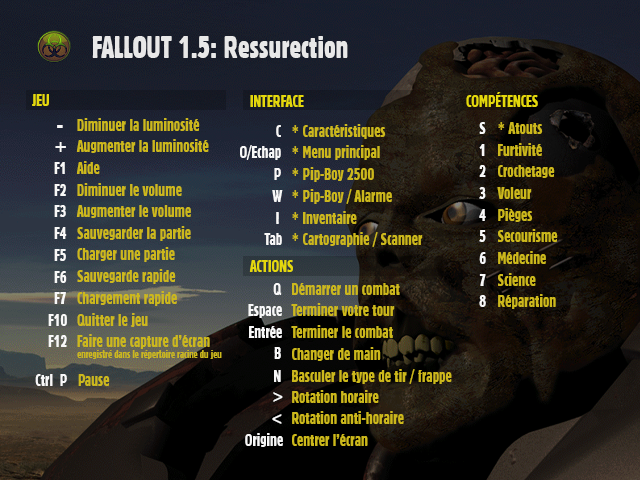
<style>
.page{position:relative;width:640px;height:480px}
.page>*{position:absolute;margin:0}
.t1{font:30px "Gothic821CondensedBT-Regular";color:#e8e8e8;scale:0.95 1}
.t2{font:17px "Gothic821CondensedBT-Regular";color:#e4d80c;scale:0.9 1}
.t3{font:19px "Gothic821CondensedBT-Regular";color:#f8f8f8;scale:1.3 1}
.t4{font:17px "Gothic821CondensedBT-Regular";color:#ccb81c;scale:0.9 1}
.t5{font:17px "Gothic821CondensedBT-Regular";color:#f8f8f8;scale:0.9 1}
.t6{font:17px "Gothic821CondensedBT-Regular";color:#f8f8f8;scale:1.05 1}
.t7{font:11px "Gothic821CondensedBT-Regular";color:#ccb81c;scale:0.9 1}
</style>
<div class="page">
<p class="t1" style="left:92px;top:36px;width:256px;height:22px">FALLOUT 1.5: Ressurection</p>
<p class="t2" style="left:32px;top:94px;width:17px;height:12px">JEU</p>
<p class="t2" style="left:250px;top:95px;width:54px;height:12px">INTERFACE</p>
<p class="t2" style="left:466px;top:92px;width:72px;height:15px">COMPÉTENCES</p>
<p class="t3" style="left:57px;top:125px;width:6px;height:3px">-</p>
<p class="t4" style="left:77px;top:118px;width:123px;height:13px">Diminuer la luminosité</p>
<p class="t5" style="left:276px;top:125px;width:5px;height:12px">C</p>
<p class="t4" style="left:292px;top:124px;width:94px;height:15px">* Caractéristiques</p>
<p class="t5" style="left:479px;top:122px;width:7px;height:12px">S</p>
<p class="t4" style="left:498px;top:122px;width:45px;height:12px">* Atouts</p>
<p class="t6" style="left:55px;top:142px;width:11px;height:10px">+</p>
<p class="t4" style="left:76px;top:139px;width:133px;height:14px">Augmenter la luminosité</p>
<p class="t5" style="left:240px;top:145px;width:41px;height:15px">O/Echap</p>
<p class="t4" style="left:292px;top:145px;width:88px;height:15px">* Menu principal</p>
<p class="t5" style="left:479px;top:144px;width:6px;height:12px">1</p>
<p class="t4" style="left:498px;top:143px;width:44px;height:13px">Furtivité</p>
<p class="t4" style="left:76px;top:161px;width:24px;height:13px">Aide</p>
<p class="t5" style="left:54px;top:162px;width:11px;height:12px">F1</p>
<p class="t5" style="left:274px;top:168px;width:7px;height:12px">P</p>
<p class="t4" style="left:292px;top:167px;width:82px;height:15px">* Pip-Boy 2500</p>
<p class="t5" style="left:479px;top:165px;width:7px;height:12px">2</p>
<p class="t4" style="left:498px;top:165px;width:57px;height:13px">Crochetage</p>
<p class="t5" style="left:54px;top:184px;width:12px;height:12px">F2</p>
<p class="t4" style="left:77px;top:183px;width:105px;height:13px">Diminuer le volume</p>
<p class="t5" style="left:272px;top:190px;width:11px;height:12px">W</p>
<p class="t4" style="left:292px;top:189px;width:100px;height:15px">* Pip-Boy / Alarme</p>
<p class="t5" style="left:479px;top:187px;width:7px;height:12px">3</p>
<p class="t4" style="left:497px;top:187px;width:35px;height:12px">Voleur</p>
<p class="t5" style="left:54px;top:205px;width:12px;height:12px">F3</p>
<p class="t4" style="left:76px;top:205px;width:115px;height:13px">Augmenter le volume</p>
<p class="t5" style="left:479px;top:209px;width:7px;height:12px">4</p>
<p class="t4" style="left:498px;top:208px;width:35px;height:14px">Pièges</p>
<p class="t5" style="left:276px;top:212px;width:3px;height:12px">I</p>
<p class="t4" style="left:292px;top:211px;width:65px;height:13px">* Inventaire</p>
<p class="t5" style="left:54px;top:227px;width:13px;height:12px">F4</p>
<p class="t4" style="left:77px;top:226px;width:114px;height:15px">Sauvegarder la partie</p>
<p class="t5" style="left:264px;top:233px;width:18px;height:12px">Tab</p>
<p class="t4" style="left:292px;top:232px;width:131px;height:15px">* Cartographie / Scanner</p>
<p class="t5" style="left:479px;top:230px;width:7px;height:12px">5</p>
<p class="t4" style="left:498px;top:229px;width:60px;height:13px">Secourisme</p>
<p class="t5" style="left:54px;top:249px;width:12px;height:12px">F5</p>
<p class="t4" style="left:77px;top:247px;width:98px;height:15px">Charger une partie</p>
<p class="t5" style="left:479px;top:252px;width:7px;height:12px">6</p>
<p class="t4" style="left:498px;top:251px;width:48px;height:13px">Médecine</p>
<p class="t4" style="left:77px;top:269px;width:99px;height:15px">Sauvegarde rapide</p>
<p class="t2" style="left:249px;top:260px;width:44px;height:12px">ACTIONS</p>
<p class="t5" style="left:54px;top:271px;width:13px;height:12px">F6</p>
<p class="t5" style="left:479px;top:274px;width:7px;height:12px">7</p>
<p class="t4" style="left:498px;top:273px;width:38px;height:13px">Science</p>
<p class="t5" style="left:54px;top:292px;width:12px;height:12px">F7</p>
<p class="t4" style="left:77px;top:291px;width:100px;height:15px">Chargement rapide</p>
<p class="t5" style="left:273px;top:283px;width:9px;height:12px">Q</p>
<p class="t4" style="left:292px;top:283px;width:108px;height:12px">Démarrer un combat</p>
<p class="t4" style="left:498px;top:294px;width:58px;height:15px">Réparation</p>
<p class="t5" style="left:248px;top:304px;width:34px;height:14px">Espace</p>
<p class="t4" style="left:291px;top:303px;width:104px;height:13px">Terminer votre tour</p>
<p class="t5" style="left:479px;top:295px;width:7px;height:12px">8</p>
<p class="t5" style="left:48px;top:314px;width:19px;height:12px">F10</p>
<p class="t4" style="left:77px;top:313px;width:71px;height:14px">Quitter le jeu</p>
<p class="t5" style="left:248px;top:326px;width:34px;height:12px">Entrée</p>
<p class="t4" style="left:291px;top:325px;width:102px;height:13px">Terminer le combat</p>
<p class="t5" style="left:48px;top:335px;width:19px;height:12px">F12</p>
<p class="t4" style="left:77px;top:334px;width:133px;height:15px">Faire une capture d’écran</p>
<p class="t7" style="left:77px;top:350px;width:145px;height:9px">enregistré dans le répertoire racine du jeu</p>
<p class="t5" style="left:274px;top:347px;width:7px;height:12px">B</p>
<p class="t4" style="left:292px;top:347px;width:89px;height:14px">Changer de main</p>
<p class="t5" style="left:35px;top:374px;width:32px;height:12px">Ctrl  P</p>
<p class="t4" style="left:78px;top:374px;width:32px;height:12px">Pause</p>
<p class="t5" style="left:274px;top:370px;width:7px;height:12px">N</p>
<p class="t4" style="left:292px;top:369px;width:160px;height:15px">Basculer le type de tir / frappe</p>
<p class="t4" style="left:292px;top:390px;width:87px;height:13px">Rotation horaire</p>
<p class="t5" style="left:273px;top:392px;width:10px;height:10px">&gt;</p>
<p class="t5" style="left:272px;top:414px;width:10px;height:10px">&lt;</p>
<p class="t4" style="left:292px;top:411px;width:112px;height:13px">Rotation anti-horaire</p>
<p class="t5" style="left:245px;top:433px;width:38px;height:14px">Origine</p>
<p class="t4" style="left:292px;top:434px;width:76px;height:12px">Centrer l’écran</p>
</div>
